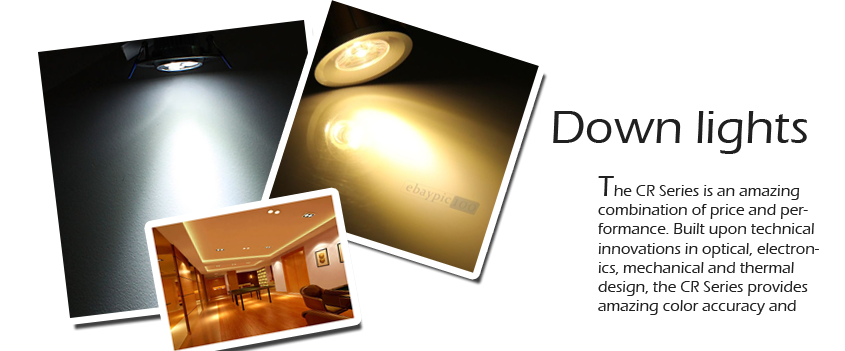
<style>
.page{position:relative;width:845px;height:351px;background:#ffffff}
.page>*{position:absolute;margin:0}
.t1{font:48px "ErasITC-Medium";color:#212020}
.t2{font:16px "ErasITC-Medium";color:#212020}
.t3{font:30px "ErasITC-Medium";color:#212020}
</style>
<div class="page">
<p class="t1" style="left:553px;top:111px;width:254px;height:43px">Down lights</p>
<p class="t2" style="left:598px;top:176px;width:221px;height:139px"><span class="t3">T</span>he CR Series is an amazing combination of price and performance. Built upon technical innovations in optical, electronics, mechanical and thermal design, the CR Series provides amazing color accuracy and advanced dimming capabilities.</p>
</div>
